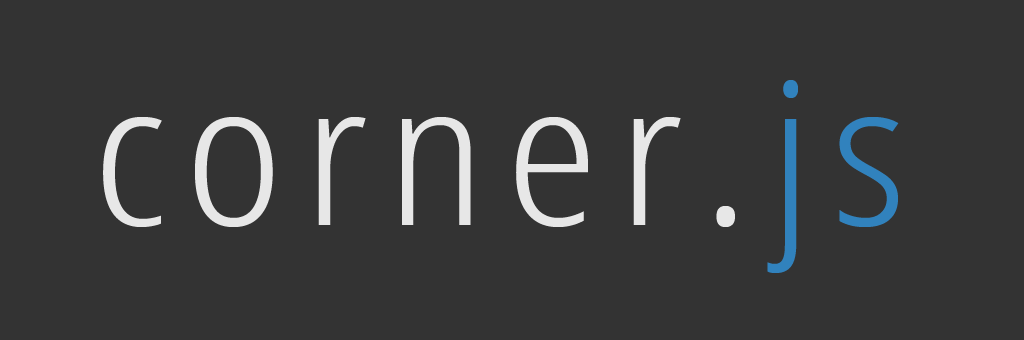
<style>
.page{position:relative;width:1024px;height:340px;background:#333333}
.page>*{position:absolute;margin:0}
.t1{font:200px "OpenSans-CondensedLight";letter-spacing:0.075em;color:#e7e7e7;scale:1.2 1}
.t2{font:200px "OpenSans-CondensedLight";letter-spacing:0.075em;color:#3182bd;scale:1.2 1}
</style>
<div class="page">
<p class="t1" style="left:103px;top:80px;width:796px;height:193px">corner.<span class="t2">js</span></p>
</div>
